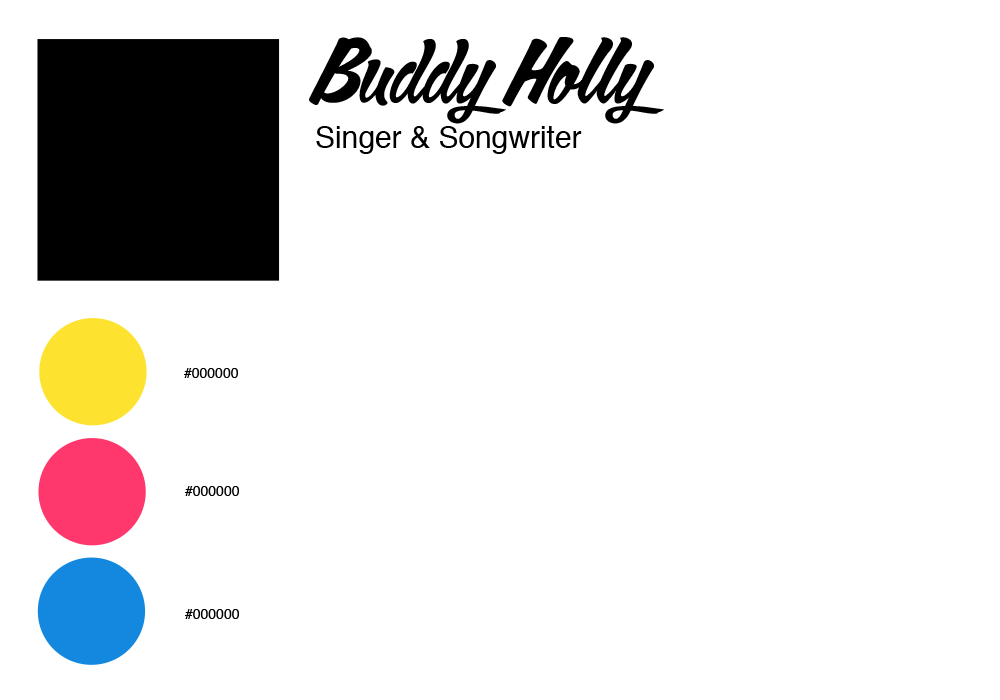
<style>
.page{position:relative;width:1000px;height:700px;background:#ffffff}
.page>*{position:absolute;margin:0}
.t1{font:85px "CalgaryScriptOT";color:#000000}
.t2{font:30px "Helvetica";color:#000000}
.t3{font:14px "Helvetica";color:#000000}
</style>
<div class="page">
<p class="t1" style="left:309px;top:37px;width:355px;height:87px">Buddy Holly</p>
<p class="t2" style="left:316px;top:126px;width:266px;height:28px">Singer &amp; Songwriter</p>
<p class="t3" style="left:184px;top:368px;width:54px;height:10px">#000000</p>
<p class="t3" style="left:185px;top:486px;width:54px;height:10px">#000000</p>
<p class="t3" style="left:185px;top:609px;width:54px;height:10px">#000000</p>
</div>
